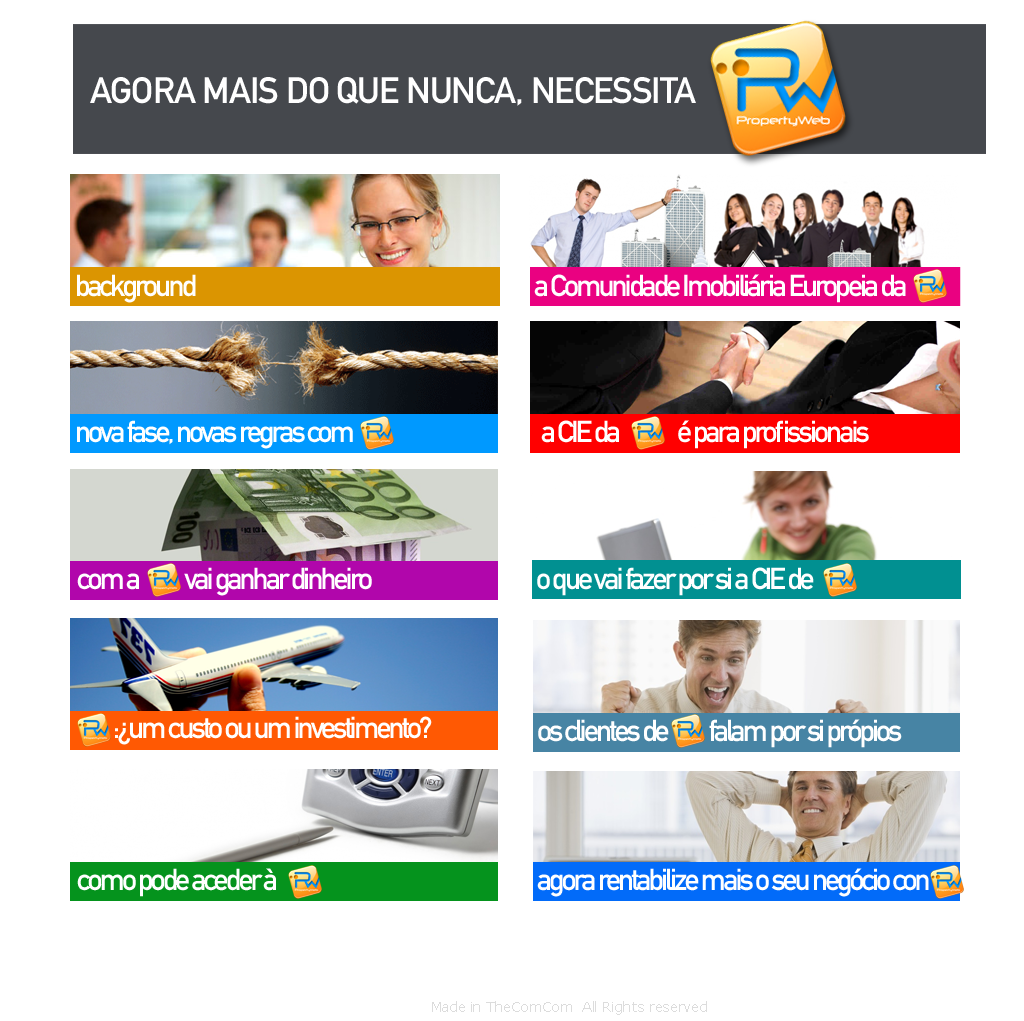
<style>
.page{position:relative;width:1024px;height:1021px;background:#ffffff}
.page>*{position:absolute;margin:0}
.t1{font:36px "DINMittelschriftStd";letter-spacing:-0.025em;color:#ffffff;text-transform:uppercase}
.t2{font:30px "DINMittelschriftStd";letter-spacing:-0.1em;color:#ffffff}
.t3{font:14px "MSReferenceSansSerif";letter-spacing:-0.025em;color:#dcdcdc}
</style>
<div class="page">
<p class="t1" style="left:90px;top:77px;width:606px;height:29px">Agora mais do que nunca, necessita</p>
<p class="t2" style="left:77px;top:274px;width:119px;height:29px">background</p>
<p class="t2" style="left:534px;top:274px;width:372px;height:29px">a Comunidade Imobiliária Europeia da</p>
<p class="t2" style="left:77px;top:420px;width:276px;height:29px">nova fase, novas regras com</p>
<p class="t2" style="left:541px;top:420px;width:328px;height:29px">a CIE da              é para profissionais</p>
<p class="t2" style="left:77px;top:567px;width:295px;height:29px">com a           vai ganhar dinheiro</p>
<p class="t2" style="left:537px;top:567px;width:277px;height:29px">o que vai fazer por si a CIE de</p>
<p class="t2" style="left:115px;top:716px;width:317px;height:29px">:¿um custo ou um investimento?</p>
<p class="t2" style="left:538px;top:719px;width:364px;height:29px">os clientes de          falam por si própios</p>
<p class="t2" style="left:77px;top:868px;width:199px;height:29px">como pode aceder à</p>
<p class="t2" style="left:537px;top:868px;width:392px;height:29px">agora rentabilize mais o seu negócio con</p>
<p class="t3" style="left:432px;top:1001px;width:275px;height:14px">Made in TheComCom  All Rights reserved</p>
</div>
